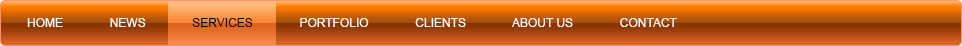
<style>
.page{position:relative;width:962px;height:46px}
.page>*{position:absolute;margin:0}
.t1{font:12px "ArialMT";color:#ffffff;text-transform:uppercase}
.t2{font:12px "ArialMT";color:#080808;text-transform:uppercase}
</style>
<div class="page">
<p class="t1" style="left:27px;top:18px;width:650px;height:9px">Home              News              <span class="t2">Services</span>              Portfolio              Clients              About Us              Contact</p>
</div>
